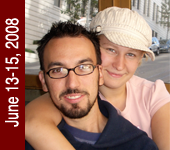
<style>
.page{position:relative;width:170px;height:150px}
.page>*{position:absolute;margin:0}
.t1{font:18.2px "Helvetica";color:#ffffff;scale:0.77 1}
</style>
<div class="page">
<p class="t1" style="left:5px;top:18px;width:16px;height:109px;rotate:-90deg">June 13-15, 2008</p>
</div>
